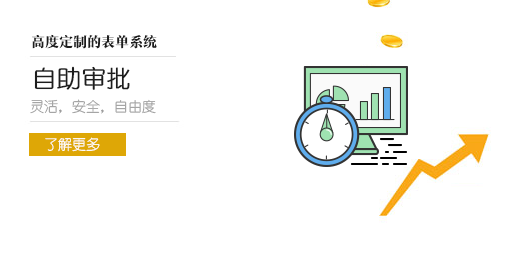
<style>
.page{position:relative;width:530px;height:253px;background:#ffffff}
.page>*{position:absolute;margin:0}
.t1{font:14px "MFShangYa_Noncommercial-Regular";color:#1d1d1d}
.t2{font:24px "YouYuan";color:#1d1d1d;font-weight:bold}
.t3{font:14px "YouYuan";color:#9d9d9d}
.t4{font:14px "YouYuan";color:#ffffff}
</style>
<div class="page">
<p class="t1" style="left:32px;top:34px;width:125px;height:15px">高度定制的表单系统</p>
<p class="t2" style="left:34px;top:66px;width:96px;height:24px">自助审批</p>
<p class="t3" style="left:30px;top:99px;width:126px;height:15px">灵活，安全，自由度</p>
<p class="t4" style="left:45px;top:137px;width:55px;height:15px">了解更多</p>
</div>
